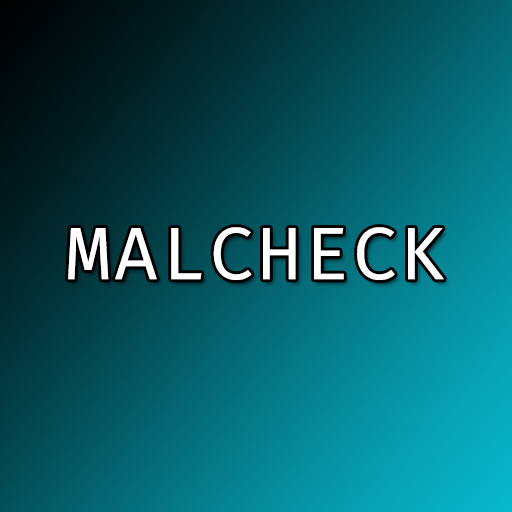
<style>
.page{position:relative;width:512px;height:512px}
.page>*{position:absolute;margin:0}
.t1{font:72px "FiraCodeNFM-Reg";letter-spacing:0.021em;color:#ffffff;font-weight:bold}
</style>
<div class="page">
<p class="t1" style="left:68px;top:227px;width:376px;height:53px">MALCHECK</p>
</div>
